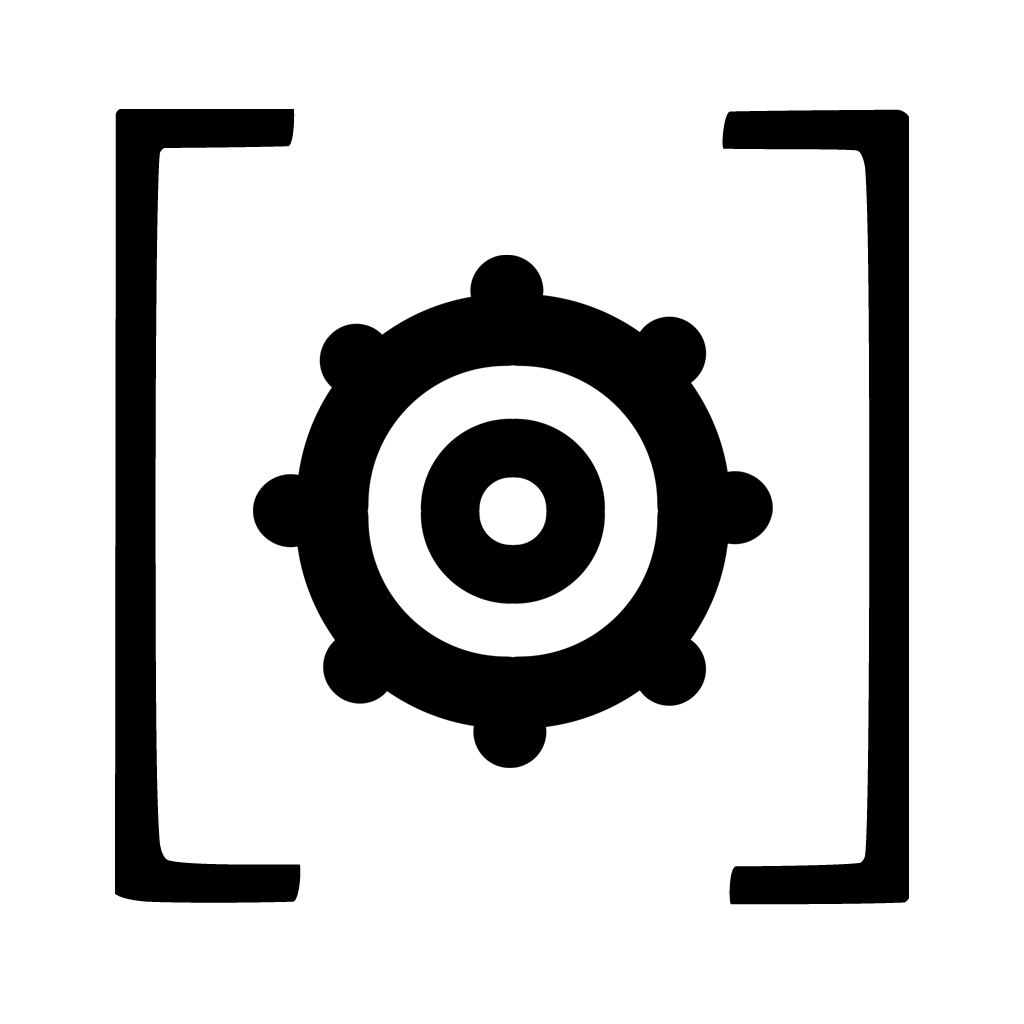
<style>
.page{position:relative;width:1024px;height:1024px;background:#ffffff}
.page>*{position:absolute;margin:0}
.t1{font:858.5px "ArnoPro-Regular";color:#000000}
</style>
<div class="page">
<p class="t1" style="left:115px;top:109px;width:794px;height:796px">[  ]</p>
</div>
